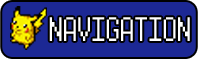
<style>
.page{position:relative;width:198px;height:59px;background:#1c2894}
.page>*{position:absolute;margin:0}
.t1{font:38px "Pokemon R/S";color:#ffffff}
</style>
<div class="page">
<p class="t1" style="left:49px;top:17px;width:141px;height:24px">NAVIGATION</p>
</div>
